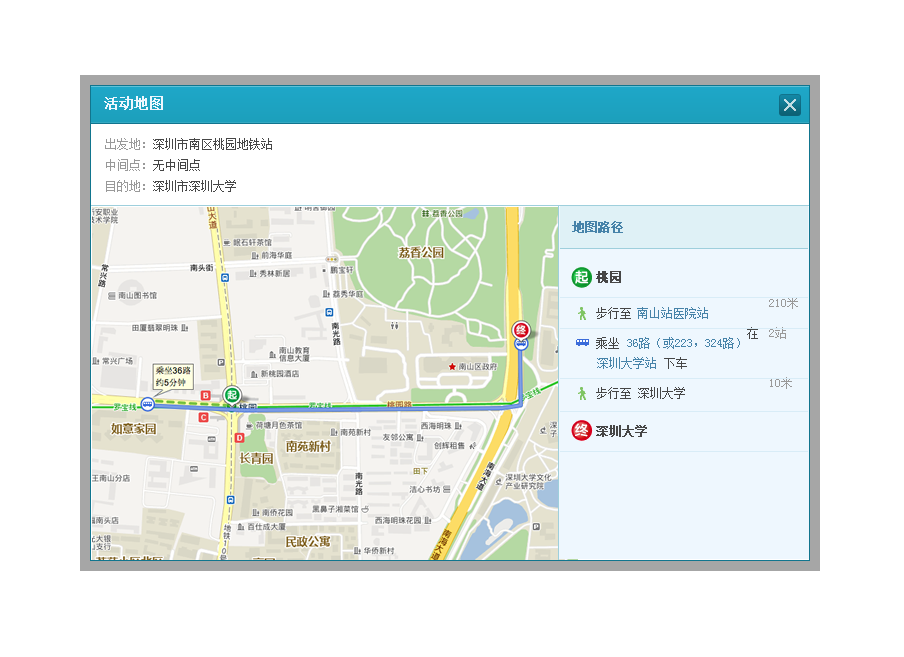
<style>
.page{position:relative;width:904px;height:657px;background:#ffffff}
.page>*{position:absolute;margin:0}
.t1{font:14px "SimSun";color:#eef7fe;font-weight:bold}
.t2{font:12px/21px "SimSun";color:#464646}
.t3{font:12px/21px "SimSun";color:#999999}
.t4{font:12px "SimSun";color:#4683a9;font-weight:bold}
.t5{font:12px "SimSun";color:#464646;font-weight:bold}
.t6{font:12px "SimSun";color:#999999}
.t7{font:12px "SimSun";color:#464646}
.t8{font:12px "SimSun";color:#4683a9}
</style>
<div class="page">
<p class="t1" style="left:104px;top:96px;width:59px;height:14px">活动地图</p>
<p class="t2" style="left:105px;top:138px;width:167px;height:54px"><span class="t3">出发地：</span>深圳市南区桃园地铁站<br><span class="t3">中间点：</span>无中间点<br><span class="t3">目的地：</span>深圳市深圳大学</p>
<p class="t4" style="left:572px;top:221px;width:51px;height:12px">地图路径</p>
<p class="t5" style="left:596px;top:271px;width:25px;height:12px">桃园</p>
<p class="t6" style="left:769px;top:297px;width:29px;height:12px">210米</p>
<p class="t7" style="left:596px;top:307px;width:35px;height:12px">步行至</p>
<p class="t8" style="left:637px;top:307px;width:71px;height:12px">南山站医院站</p>
<p class="t7" style="left:747px;top:327px;width:11px;height:12px">在</p>
<p class="t6" style="left:769px;top:327px;width:17px;height:12px">2站</p>
<p class="t7" style="left:596px;top:337px;width:23px;height:12px">乘坐</p>
<p class="t8" style="left:627px;top:337px;width:113px;height:12px">36路（或223，324路）</p>
<p class="t8" style="left:597px;top:357px;width:59px;height:12px">深圳大学站</p>
<p class="t7" style="left:664px;top:357px;width:23px;height:12px">下车</p>
<p class="t6" style="left:770px;top:377px;width:22px;height:12px">10米</p>
<p class="t7" style="left:596px;top:387px;width:89px;height:12px">步行至 深圳大学</p>
<p class="t5" style="left:596px;top:425px;width:51px;height:12px">深圳大学</p>
</div>
